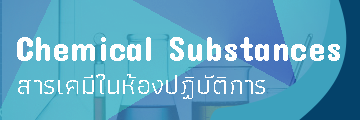
<style>
.page{position:relative;width:360px;height:120px}
.page>*{position:absolute;margin:0}
.t1{font:34.7px "ConcertOne-Regular";letter-spacing:0.01em;color:#ffffff}
.t2{font:27px "Athiti-Regular";letter-spacing:0.01em;color:#ffffff}
</style>
<div class="page">
<p class="t1" style="left:17px;top:37px;width:323px;height:24px">Chemical Substances</p>
<p class="t2" style="left:18px;top:74px;width:247px;height:25px">สารเคมีในห้องปฏิบัติการ</p>
</div>
